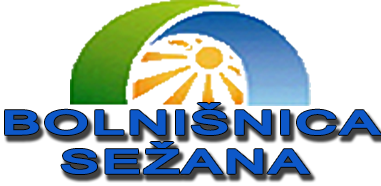
<style>
.page{position:relative;width:381px;height:186px;background:#ffffff}
.page>*{position:absolute;margin:0}
.t1{font:32.6px "Mangal-Bold";color:#0d58c9;scale:1.8 1}
</style>
<div class="page">
<p class="t1" style="left:5px;top:103px;width:376px;height:71px">BOLNIŠNICA<br>  SEŽANA</p>
</div>
